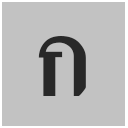
<style>
.page{position:relative;width:128px;height:128px;background:#c2c2c2}
.page>*{position:absolute;margin:0}
.t1{font:149.8px "AngsanaNew-Bold";color:#282828}
</style>
<div class="page">
<p class="t1" style="left:38px;top:36px;width:48px;height:60px">ก</p>
</div>
